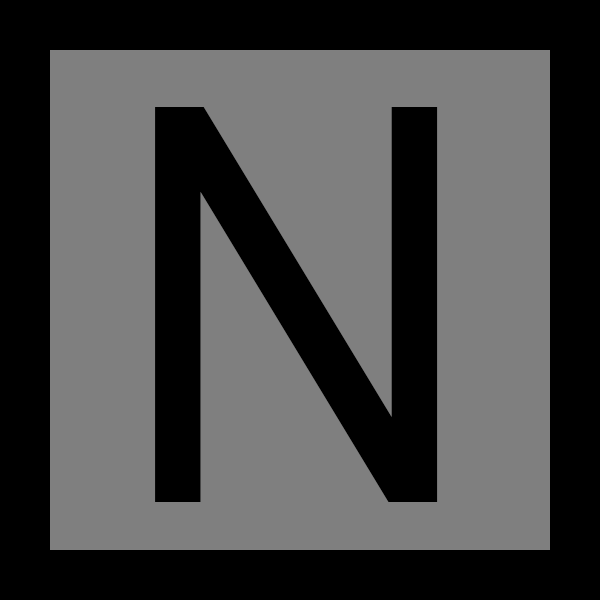
<style>
.page{position:relative;width:600px;height:600px;background:#7f7f7f}
.page>*{position:absolute;margin:0}
.t1{font:552.1px "ArialMT";color:#000000;scale:0.91 1}
</style>
<div class="page">
<p class="t1" style="left:155px;top:107px;width:283px;height:395px">N</p>
</div>
